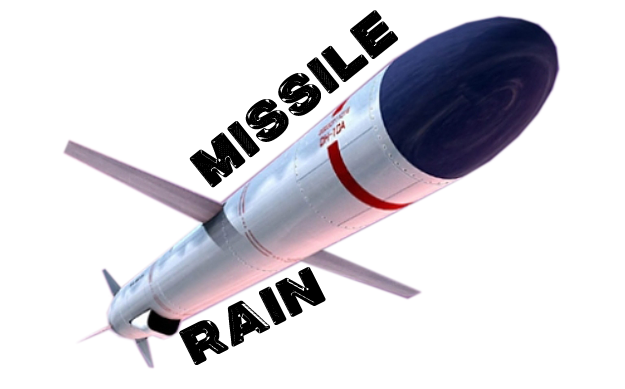
<style>
.page{position:relative;width:625px;height:389px;background:#ffffff}
.page>*{position:absolute;margin:0}
.t1{font:58.3px "GRAVISPERSONALUSE-Regular";letter-spacing:0.04em;color:#000000}
</style>
<div class="page">
<p class="t1" style="left:189px;top:10px;width:209px;height:178px;rotate:-39deg">missile</p>
<p class="t1" style="left:179px;top:267px;width:147px;height:98px;rotate:-27deg">rain</p>
</div>
